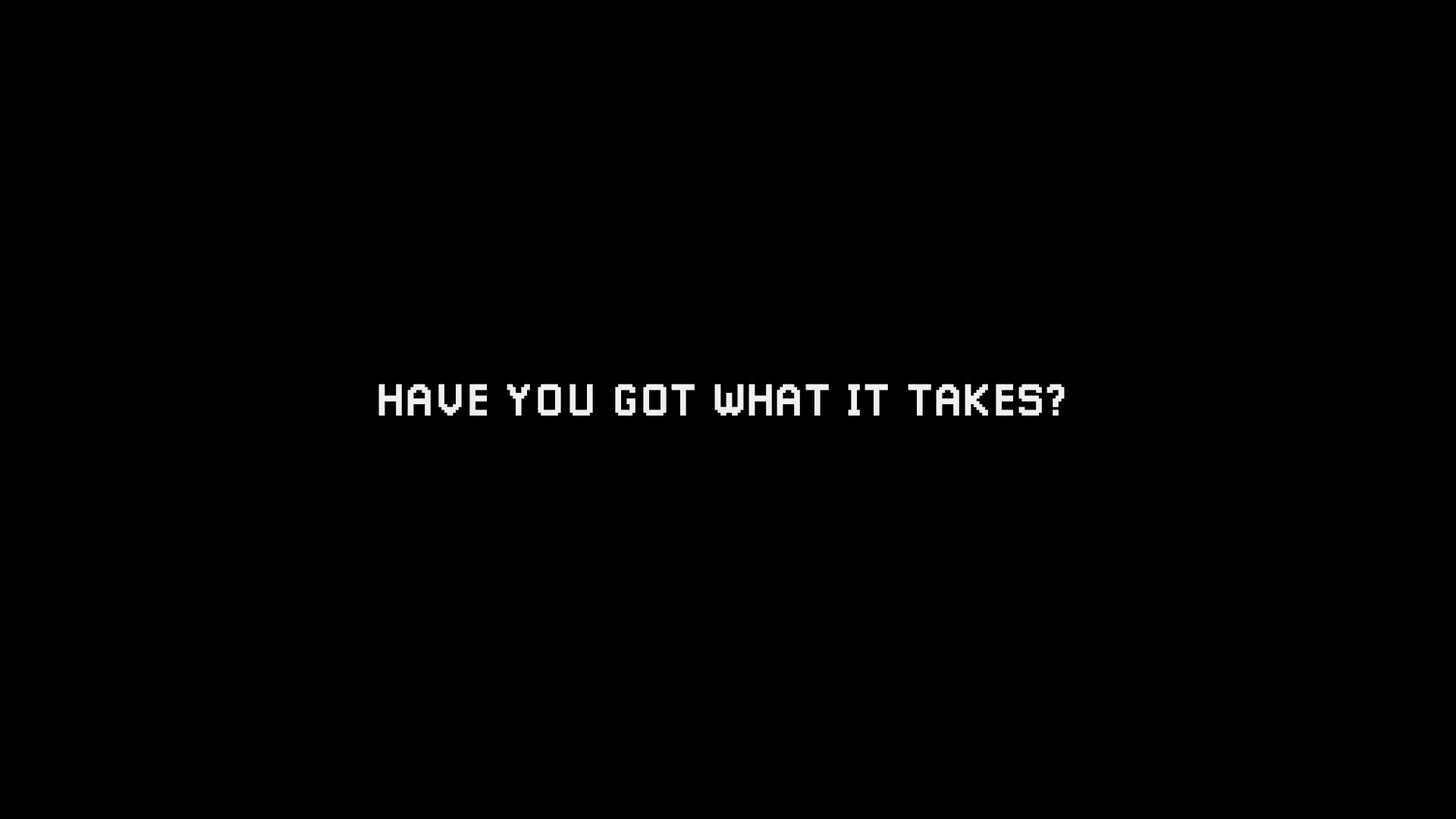
<style>
.page{position:relative;width:1456px;height:819px;background:#000000}
.page>*{position:absolute;margin:0}
.t1{font:45.5px "Pixellari";color:#f0f0f0}
</style>
<div class="page">
<p class="t1" style="left:378px;top:384px;width:687px;height:32px">HAVE YOU GOT WHAT IT TAKES?</p>
</div>
